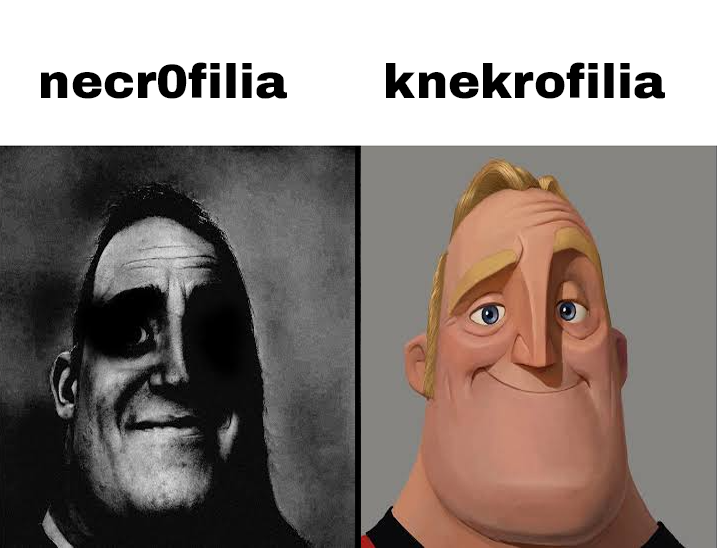
<style>
.page{position:relative;width:717px;height:548px;background:#ffffff}
.page>*{position:absolute;margin:0}
.t1{font:48.2px "ArchivoBlack-Regular";color:#000000}
</style>
<div class="page">
<p class="t1" style="left:41px;top:62px;width:246px;height:37px">necr0filia</p>
<p class="t1" style="left:386px;top:62px;width:279px;height:37px">knekrofilia</p>
</div>
